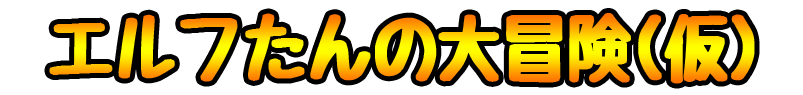
<style>
.page{position:relative;width:803px;height:95px;background:#ffffff}
.page>*{position:absolute;margin:0}
.t1{font:72px "Jiyucho";scale:0.9 1}
</style>
<div class="page">
<p class="t1" style="left:49px;top:13px;width:706px;height:71px">エルフたんの大冒険（仮）</p>
</div>
